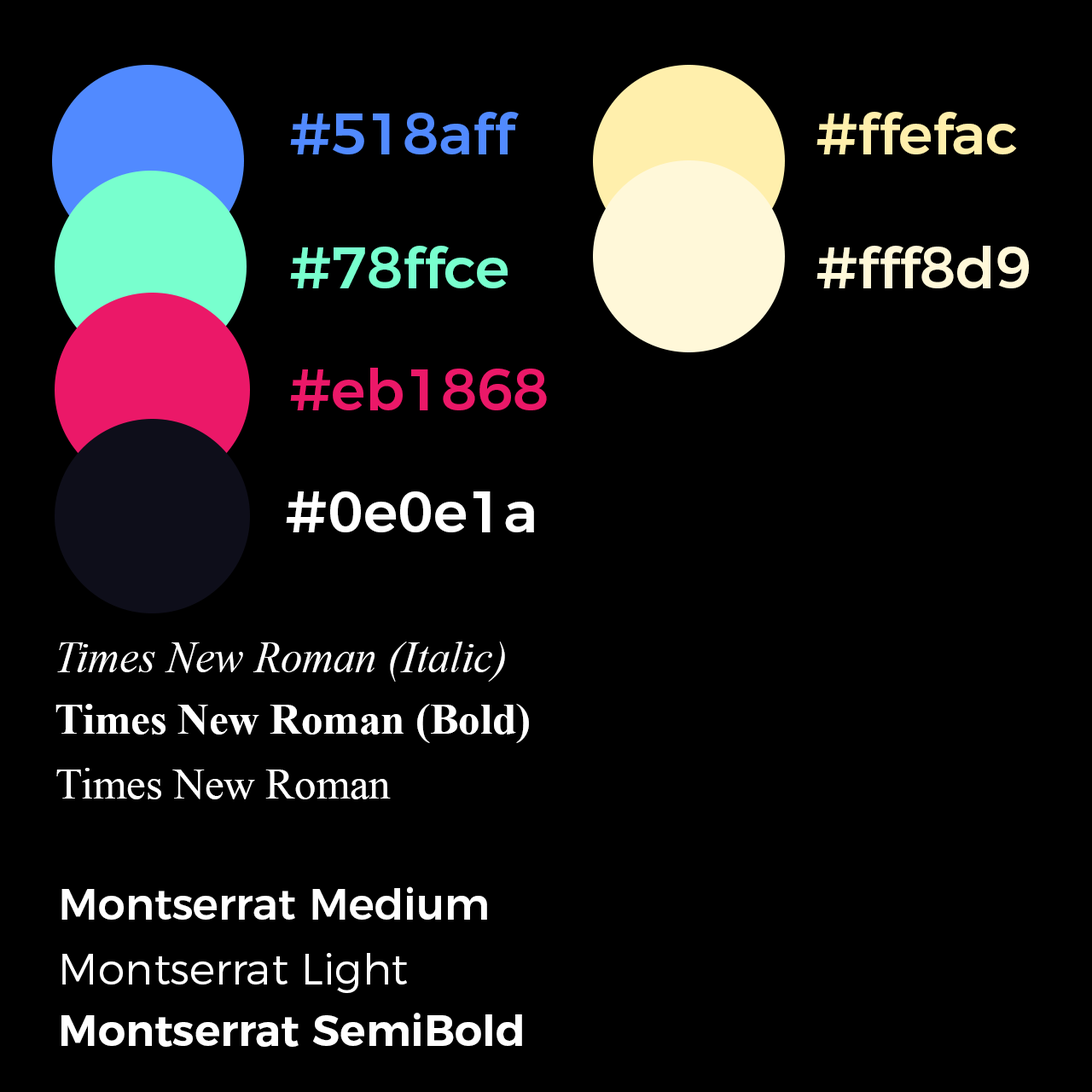
<style>
.page{position:relative;width:1092px;height:1092px;background:#000000}
.page>*{position:absolute;margin:0}
.t1{font:57.9px "Montserrat-Medium";color:#518aff}
.t2{font:57.9px "Montserrat-Medium";color:#ffefac}
.t3{font:57.9px "Montserrat-Medium";color:#78ffce}
.t4{font:57.9px "Montserrat-Medium";color:#fff8d9}
.t5{font:57.9px "Montserrat-Medium";color:#eb1868}
.t6{font:57.9px "Montserrat-Medium";color:#ffffff}
.t7{font:43.1px "TimesNewRomanPS-ItalicMT";color:#ffffff}
.t8{font:43.1px "TimesNewRomanPS-BoldMT";color:#ffffff}
.t9{font:43.1px "TimesNewRomanPSMT";color:#ffffff}
.t10{font:43.1px "Montserrat-Medium";color:#ffffff}
.t11{font:43.1px "Montserrat-Light";color:#ffffff}
.t12{font:43.1px "Montserrat-SemiBold";color:#ffffff}
</style>
<div class="page">
<p class="t1" style="left:290px;top:112px;width:229px;height:42px">#518aff</p>
<p class="t2" style="left:816px;top:112px;width:201px;height:42px">#ffefac</p>
<p class="t3" style="left:290px;top:246px;width:218px;height:42px">#78ffce</p>
<p class="t4" style="left:816px;top:246px;width:213px;height:42px">#fff8d9</p>
<p class="t5" style="left:290px;top:368px;width:257px;height:42px">#eb1868</p>
<p class="t6" style="left:286px;top:491px;width:248px;height:41px">#0e0e1a</p>
<p class="t7" style="left:57px;top:642px;width:448px;height:40px">Times New Roman (Italic)</p>
<p class="t8" style="left:55px;top:704px;width:474px;height:39px">Times New Roman (Bold)</p>
<p class="t9" style="left:56px;top:768px;width:335px;height:31px">Times New Roman</p>
<p class="t10" style="left:61px;top:886px;width:426px;height:34px">Montserrat Medium</p>
<p class="t11" style="left:62px;top:953px;width:345px;height:40px">Montserrat Light</p>
<p class="t12" style="left:61px;top:1013px;width:461px;height:34px">Montserrat SemiBold</p>
</div>
